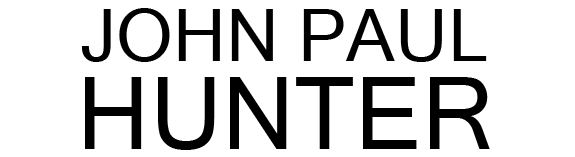
<style>
.page{position:relative;width:575px;height:157px;background:#ffffff}
.page>*{position:absolute;margin:0}
.t1{font:73px "MicrosoftSansSerif";color:#000000}
.t2{font:100px "MicrosoftSansSerif";color:#000000}
</style>
<div class="page">
<p class="t1" style="left:82px;top:8px;width:405px;height:54px">JOHN PAUL</p>
<p class="t2" style="left:85px;top:77px;width:405px;height:73px">HUNTER</p>
</div>
